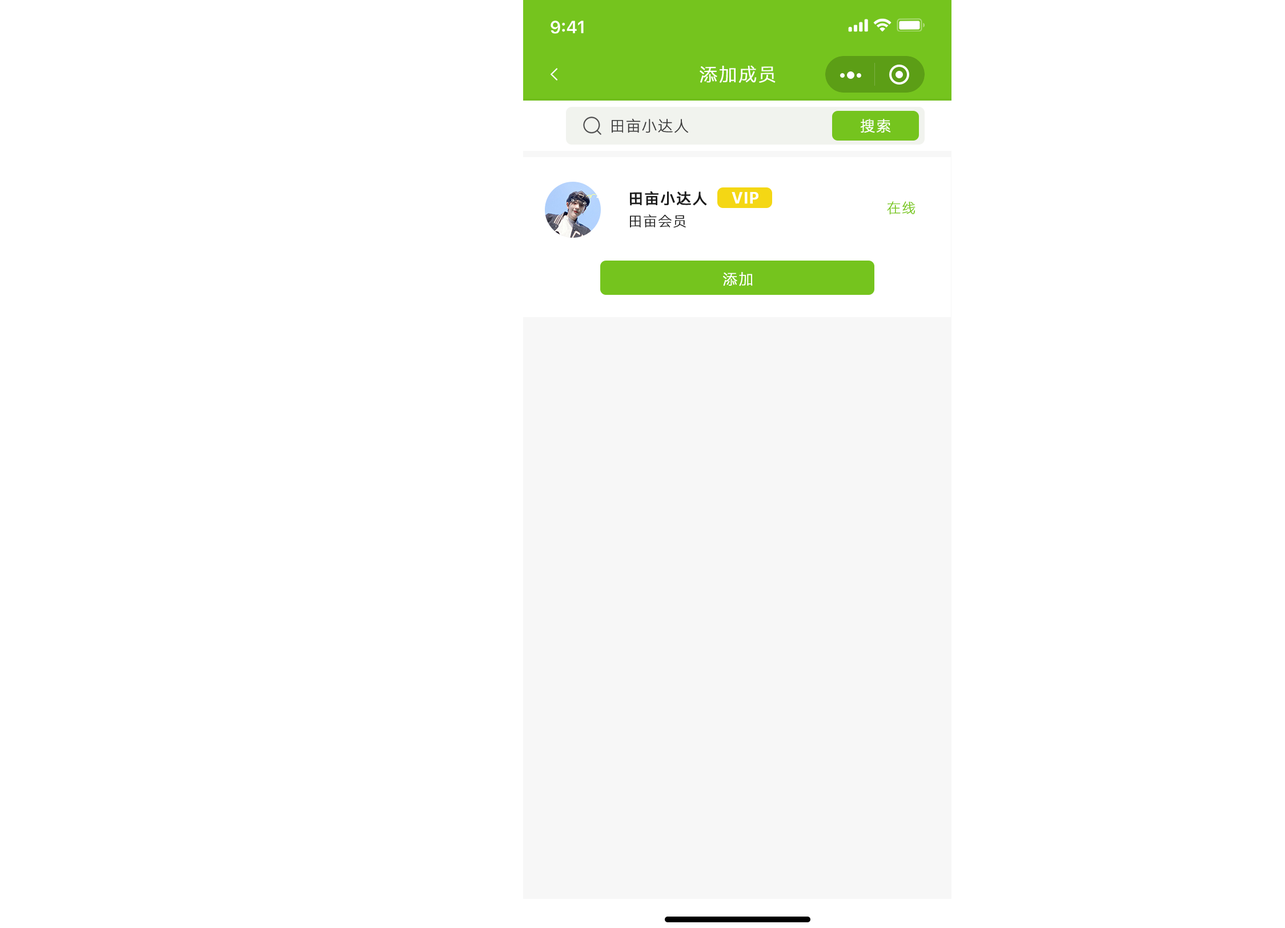
<style>
.page{position:relative;width:1285px;height:928px;background:#ffffff}
.page>*{position:absolute;margin:0}
.t1{font:18.3px "HarmonyOS_Sans_SC_Light";letter-spacing:0.04em;color:#ffffff;text-transform:uppercase;font-weight:bold}
.t2{font:14.8px "HarmonyOS_Sans_SC_Thin";letter-spacing:0.04em;color:#3a3a3a;text-transform:uppercase;font-weight:bold}
.t3{font:14.9px "HarmonyOS_Sans_SC_Light";letter-spacing:0.04em;color:#ffffff;text-transform:uppercase;font-weight:bold}
.t4{font:14.9px "HarmonyOS_Sans_SC";letter-spacing:0.04em;color:#1c1c1c;text-transform:uppercase;font-weight:bold}
.t5{font:13.7px "OPPOSans-H";letter-spacing:0.04em;color:#ffffff;text-transform:uppercase;font-weight:bold}
.t6{font:13.7px "HarmonyOS_Sans_SC_Thin";letter-spacing:0.04em;color:#75c41e;text-transform:uppercase;font-weight:bold}
.t7{font:13.7px "HarmonyOS_Sans_SC_Thin";letter-spacing:0.04em;color:#1c1c1c;text-transform:uppercase;font-weight:bold}
</style>
<div class="page">
<p class="t1" style="left:700px;top:65px;width:76px;height:18px">添加成员</p>
<p class="t2" style="left:612px;top:118px;width:76px;height:15px">田亩小达人</p>
<p class="t3" style="left:860px;top:119px;width:31px;height:14px">搜索</p>
<p class="t4" style="left:630px;top:191px;width:77px;height:15px">田亩小达人</p>
<p class="t5" style="left:732px;top:192px;width:27px;height:12px">vip</p>
<p class="t6" style="left:887px;top:201px;width:29px;height:14px">在线</p>
<p class="t7" style="left:630px;top:214px;width:56px;height:14px">田亩会员</p>
<p class="t3" style="left:723px;top:272px;width:30px;height:14px">添加</p>
</div>
